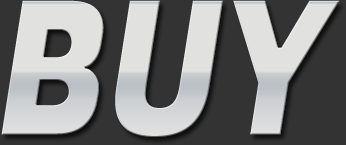
<style>
.page{position:relative;width:346px;height:145px;background:#333333}
.page>*{position:absolute;margin:0}
.t1{font:185.2px "FugazOne-Regular";color:#dfdfdf;scale:0.89 1}
</style>
<div class="page">
<p class="t1" style="left:1px;top:0px;width:339px;height:137px">BUY</p>
</div>
